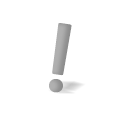
<style>
.page{position:relative;width:114px;height:114px;background:#ffffff}
.page>*{position:absolute;margin:0}
.t1{font:87.6px "NanumGothicExtraBold";color:#b0b0b0}
</style>
<div class="page">
<p class="t1" style="left:49px;top:23px;width:23px;height:70px;rotate:8deg">!</p>
</div>
